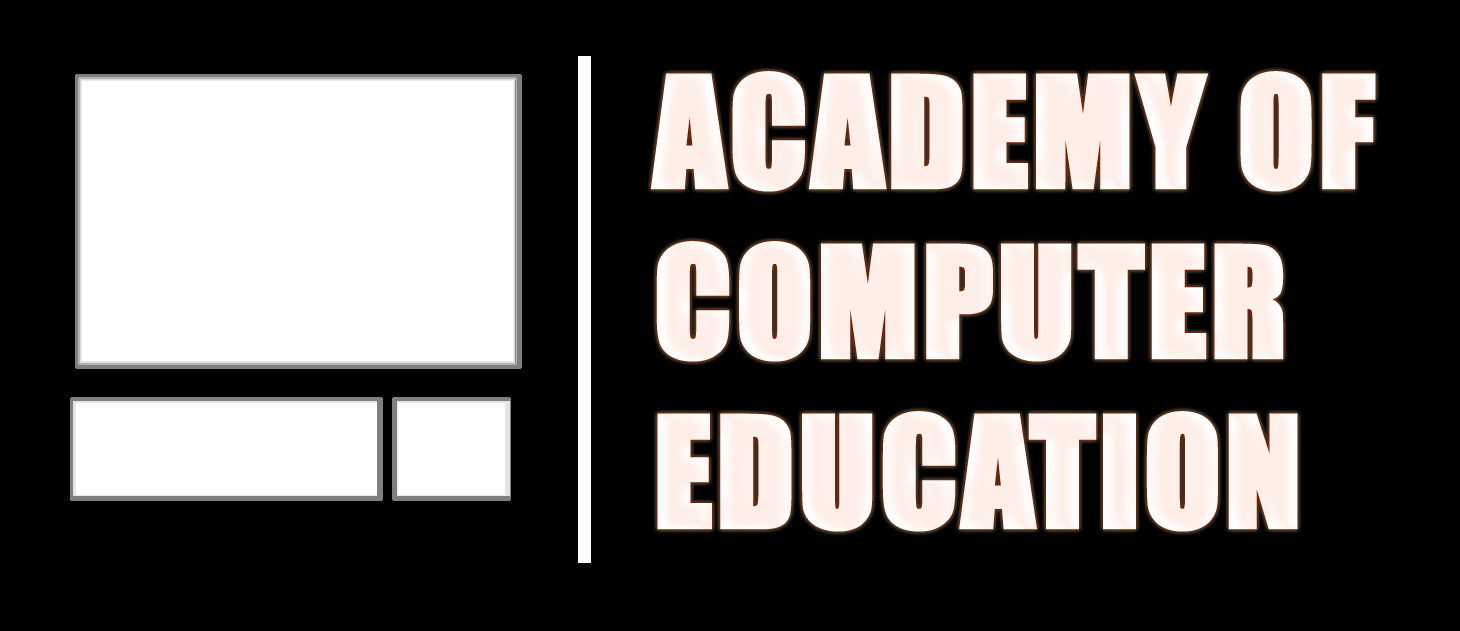
<style>
.page{position:relative;width:1460px;height:631px;background:#000000}
.page>*{position:absolute;margin:0}
.t1{font:141.7px "Impact";color:#ffffff;text-transform:uppercase;font-weight:bold}
</style>
<div class="page">
<p class="t1" style="left:650px;top:71px;width:726px;height:461px">Academy of<br>Computer<br>Education</p>
</div>
